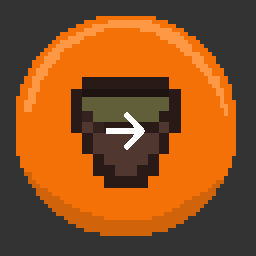
<style>
.page{position:relative;width:256px;height:256px;background:#333333}
.page>*{position:absolute;margin:0}
.t1{font:51.3px "Calibri-Bold";color:#ffffff}
</style>
<div class="page">
<p class="t1" style="left:106px;top:112px;width:39px;height:38px">→</p>
</div>
